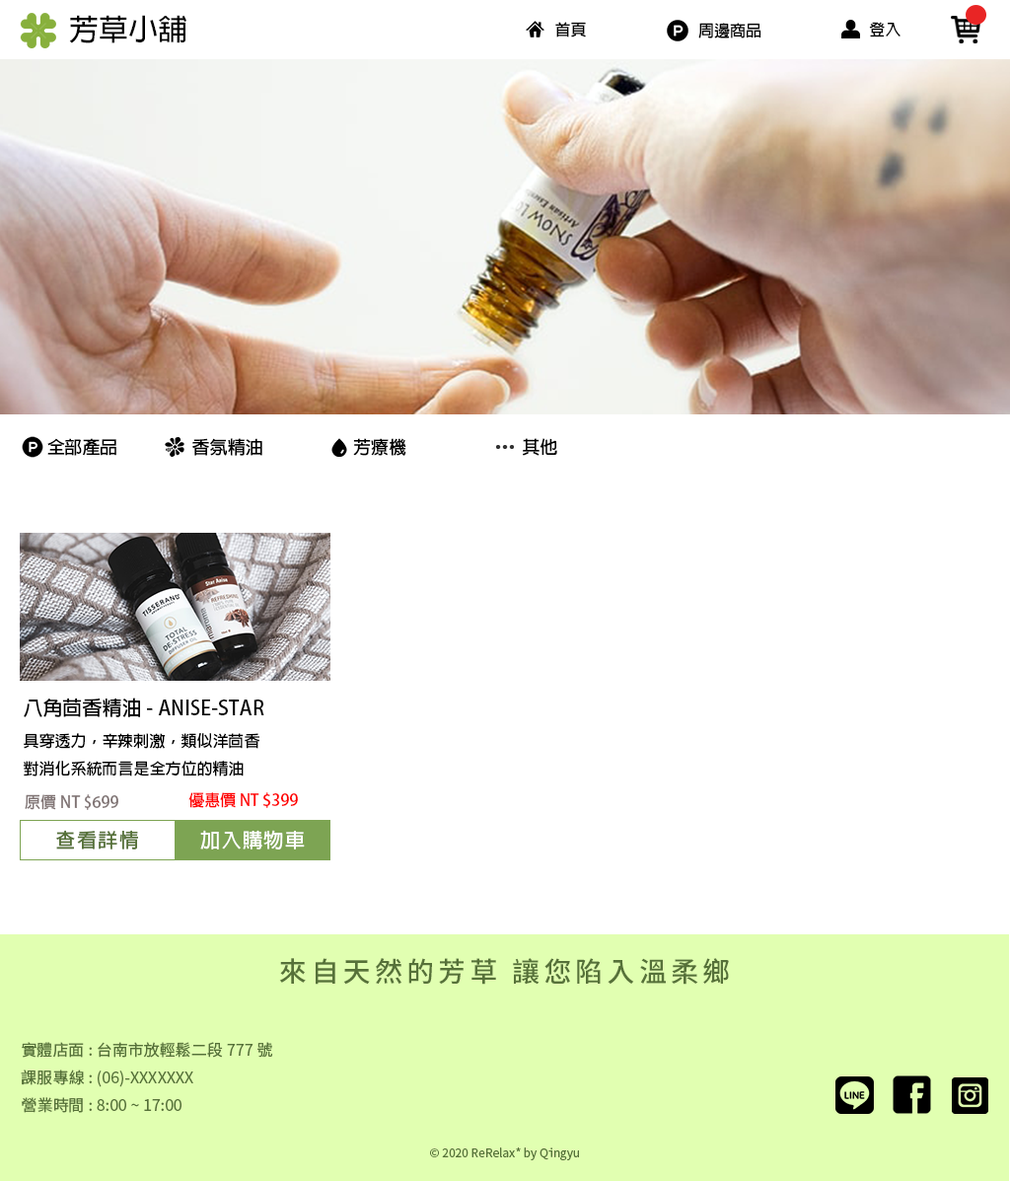
<style>
.page{position:relative;width:1010px;height:1181px;background:#ffffff}
.page>*{position:absolute;margin:0}
.t1{font:29.6px "AdobeFanHeitiStd-Bold";color:#000000}
.t2{font:15.8px "AdobeFanHeitiStd-Bold";color:#000000}
.t3{font:17.8px "AdobeFanHeitiStd-Bold";color:#000000}
.t4{font:19.7px "AdobeFanHeitiStd-Bold";color:#000000}
.t5{font:15.8px "AdobeFanHeitiStd-Bold";color:#807474}
.t6{font:15.8px "AdobeFanHeitiStd-Bold";color:#ff0000}
.t7{font:19.7px "AdobeFanHeitiStd-Bold";letter-spacing:0.08em;color:#567139}
.t8{font:19.7px "AdobeFanHeitiStd-Bold";letter-spacing:0.08em;color:#ffffff}
.t9{font:27.6px "NotoSansTC-Medium";letter-spacing:0.15em;color:#567139}
.t10{font:15.8px "NotoSansTC-Regular";color:#567139}
.t11{font:11.8px "NotoSansTC-Regular";color:#567139}
</style>
<div class="page">
<p class="t1" style="left:69px;top:15px;width:117px;height:28px">芳草小舖</p>
<p class="t2" style="left:555px;top:22px;width:31px;height:15px">首頁</p>
<p class="t2" style="left:698px;top:23px;width:63px;height:15px">周邊商品</p>
<p class="t2" style="left:869px;top:22px;width:32px;height:15px">登入</p>
<p class="t3" style="left:47px;top:438px;width:69px;height:18px">全部產品</p>
<p class="t3" style="left:192px;top:438px;width:70px;height:18px">香氛精油</p>
<p class="t3" style="left:353px;top:438px;width:53px;height:18px">芳療機</p>
<p class="t3" style="left:523px;top:438px;width:34px;height:18px">其他</p>
<p class="t2" style="left:23px;top:697px;width:241px;height:79px"><span class="t4">八角茴香精油- ANISE-STAR<br></span>具穿透力，辛辣刺激，類似洋茴香<br>對消化系統而言是全方位的精油</p>
<p class="t5" style="left:25px;top:794px;width:93px;height:16px">原價NT $699</p>
<p class="t6" style="left:188px;top:792px;width:110px;height:16px">優惠價 NT $399</p>
<p class="t7" style="left:56px;top:829px;width:82px;height:20px">查看詳情</p>
<p class="t8" style="left:200px;top:829px;width:105px;height:20px">加入購物車</p>
<p class="t9" style="left:279px;top:958px;width:450px;height:26px">來自天然的芳草 讓您陷入溫柔鄉</p>
<p class="t10" style="left:21px;top:1042px;width:251px;height:71px">實體店面: 台南市放輕鬆二段777號 <br>課服專線: (06)-XXXXXXX<br>營業時間: 8:00 ~ 17:00</p>
<p class="t11" style="left:430px;top:1147px;width:149px;height:13px">© 2020 ReRelax* by Qingyu</p>
</div>
